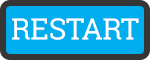
<style>
.page{position:relative;width:150px;height:60px;background:#00aeef}
.page>*{position:absolute;margin:0}
.t1{font:29.6px "RobotoSlab-Regular";letter-spacing:-0.01em;color:#ffffff}
</style>
<div class="page">
<p class="t1" style="left:12px;top:18px;width:127px;height:22px">RESTART</p>
</div>
